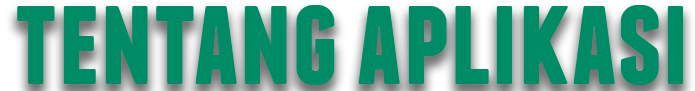
<style>
.page{position:relative;width:695px;height:91px;background:#008b67}
.page>*{position:absolute;margin:0}
.t1{font:129.8px "Franchise-Bold";color:#008b67}
</style>
<div class="page">
<p class="t1" style="left:17px;top:5px;width:667px;height:80px">tentang aplikasi</p>
</div>
